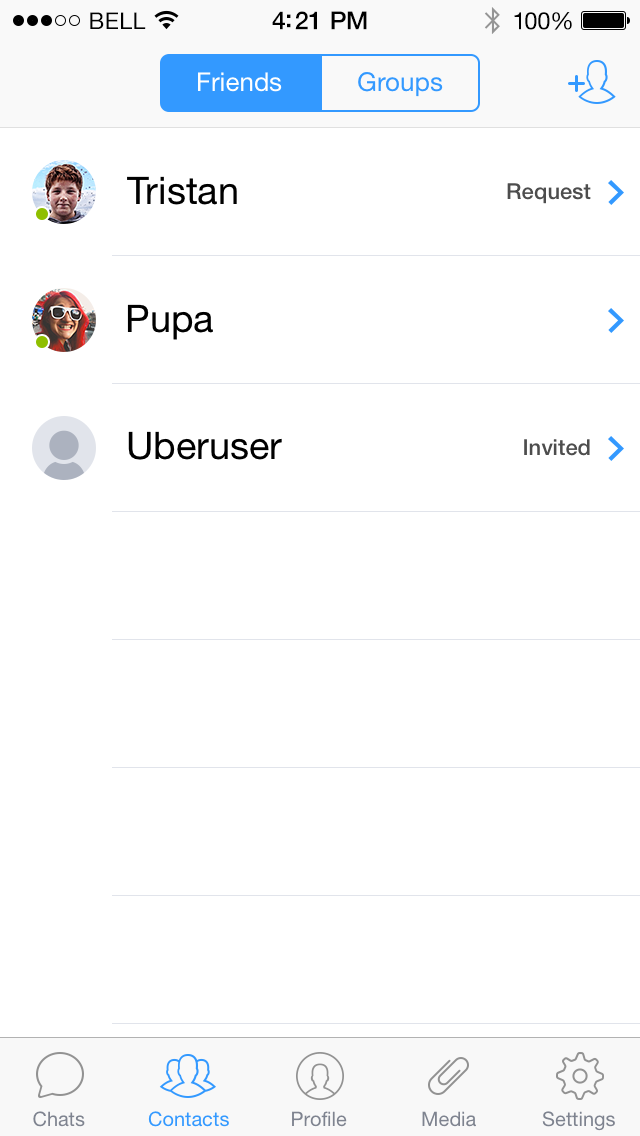
<style>
.page{position:relative;width:640px;height:1136px;background:#ffffff}
.page>*{position:absolute;margin:0}
.t1{font:23px "HelveticaNeue";letter-spacing:0.02em;color:#000000}
.t2{font:25px "HelveticaNeue-Medium";letter-spacing:-0.02em;color:#000000}
.t3{font:24px "HelveticaNeue";letter-spacing:-0.02em;color:#000000}
.t4{font:26px "HelveticaNeue";color:#ffffff}
.t5{font:26px "HelveticaNeue";color:#3399ff}
.t6{font:38px "HelveticaNeue";color:#000000}
.t7{font:22px "HelveticaNeue-Medium";color:#4d4d4d}
.t8{font:20px "HelveticaNeue";color:#7e838f}
.t9{font:20px "HelveticaNeue";color:#3399ff}
</style>
<div class="page">
<p class="t1" style="left:90px;top:12px;width:56px;height:17px">BELL</p>
<p class="t2" style="left:272px;top:11px;width:95px;height:19px">4:21 PM</p>
<p class="t3" style="left:514px;top:12px;width:58px;height:18px">100%</p>
<p class="t4" style="left:198px;top:72px;width:84px;height:20px">Friends</p>
<p class="t5" style="left:358px;top:72px;width:85px;height:25px">Groups</p>
<p class="t6" style="left:127px;top:176px;width:110px;height:29px">Tristan</p>
<p class="t7" style="left:507px;top:183px;width:84px;height:21px">Request</p>
<p class="t6" style="left:127px;top:304px;width:86px;height:36px">Pupa</p>
<p class="t6" style="left:128px;top:431px;width:154px;height:29px">Uberuser</p>
<p class="t7" style="left:524px;top:439px;width:66px;height:17px">Invited</p>
<p class="t8" style="left:33px;top:1111px;width:52px;height:16px">Chats</p>
<p class="t9" style="left:148px;top:1111px;width:81px;height:16px">Contacts</p>
<p class="t8" style="left:292px;top:1111px;width:55px;height:16px">Profile</p>
<p class="t8" style="left:422px;top:1111px;width:54px;height:16px">Media</p>
<p class="t8" style="left:542px;top:1111px;width:73px;height:20px">Settings</p>
</div>
